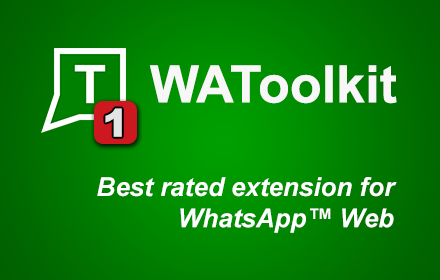
<style>
.page{position:relative;width:440px;height:280px}
.page>*{position:absolute;margin:0}
.t1{font:51.8px "Arial-BoldMT";color:#f7f7f7}
.t2{font:51.8px "Arial-BoldMT";color:#008000}
.t3{font:38.7px "Arial-Black";color:#e3e4e3}
.t4{font:26px "Arial-BoldItalicMT";color:#ffffff}
</style>
<div class="page">
<p class="t1" style="left:44px;top:65px;width:353px;height:48px"><span class="t2">_</span>T   WAToolkit</p>
<p class="t3" style="left:105px;top:108px;width:17px;height:29px">1</p>
<p class="t4" style="left:97px;top:177px;width:300px;height:56px;text-align:right">Best rated extension for<br>WhatsApp™ Web</p>
</div>
